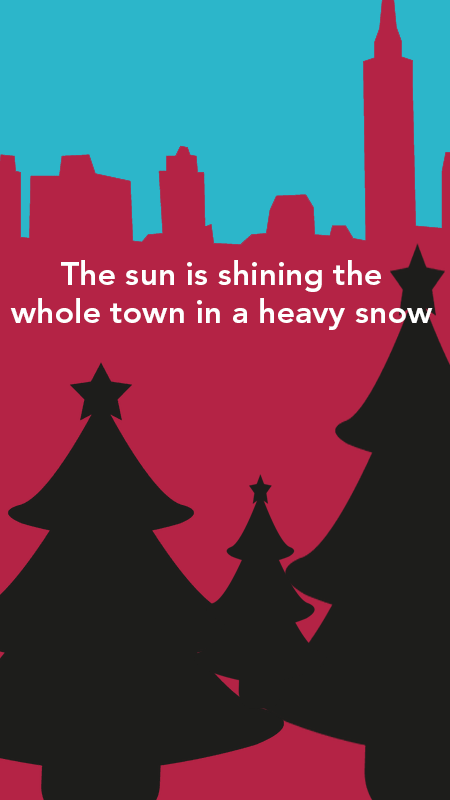
<style>
.page{position:relative;width:450px;height:800px;background:#b42345}
.page>*{position:absolute;margin:0}
.t1{font:32px "AvenirLTStd-Heavy";color:#ffffff}
</style>
<div class="page">
<p class="t1" style="left:10px;top:260px;width:423px;height:70px;text-align:center">The sun is shining the<br>whole town in a heavy snow</p>
</div>
